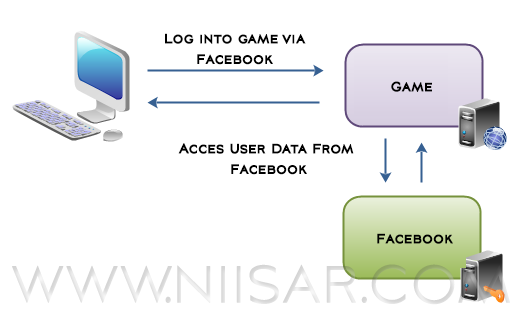
<style>
.page{position:relative;width:524px;height:334px;background:#ffffff}
.page>*{position:absolute;margin:0}
.t1{font:17px "AvianoSansBold";color:#000000;font-weight:bold;scale:0.76 1}
</style>
<div class="page">
<p class="t1" style="left:165px;top:33px;width:141px;height:32px;text-align:center">Log into game via<br>Facebook</p>
<p class="t1" style="left:391px;top:81px;width:41px;height:11px">Game</p>
<p class="t1" style="left:178px;top:143px;width:176px;height:32px;text-align:center">Acces User Data From <br>Facebook</p>
<p class="t1" style="left:377px;top:233px;width:76px;height:11px">Facebook</p>
</div>
